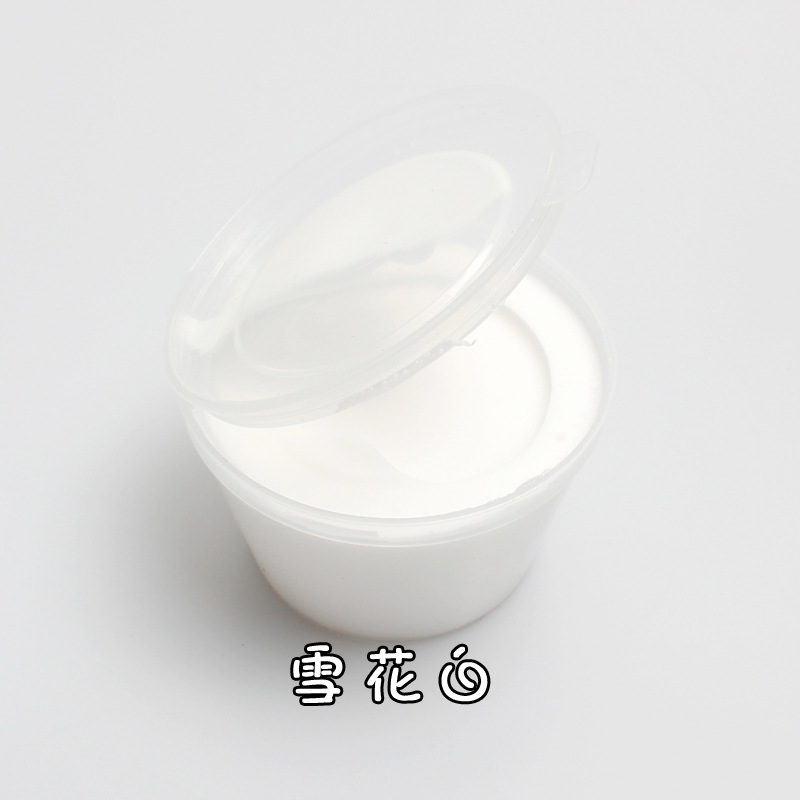
<style>
.page{position:relative;width:800px;height:800px}
.page>*{position:absolute;margin:0}
.t1{font:72px "DFPao-W4-WINP-BF";color:#ffffff;font-weight:bold}
</style>
<div class="page">
<p class="t1" style="left:293px;top:645px;width:195px;height:58px">雪花白</p>
</div>
